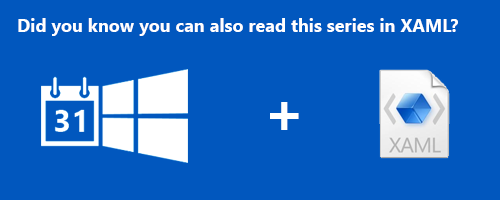
<style>
.page{position:relative;width:500px;height:200px;background:#0157be}
.page>*{position:absolute;margin:0}
.t1{font:18px "SegoeUI-Bold";color:#ffffff}
.t2{font:60px "SegoeUI-Bold";color:#ffffff}
</style>
<div class="page">
<p class="t1" style="left:18px;top:18px;width:440px;height:18px">Did you know you can also read this series in XAML?</p>
<p class="t2" style="left:270px;top:102px;width:29px;height:28px">+</p>
</div>
